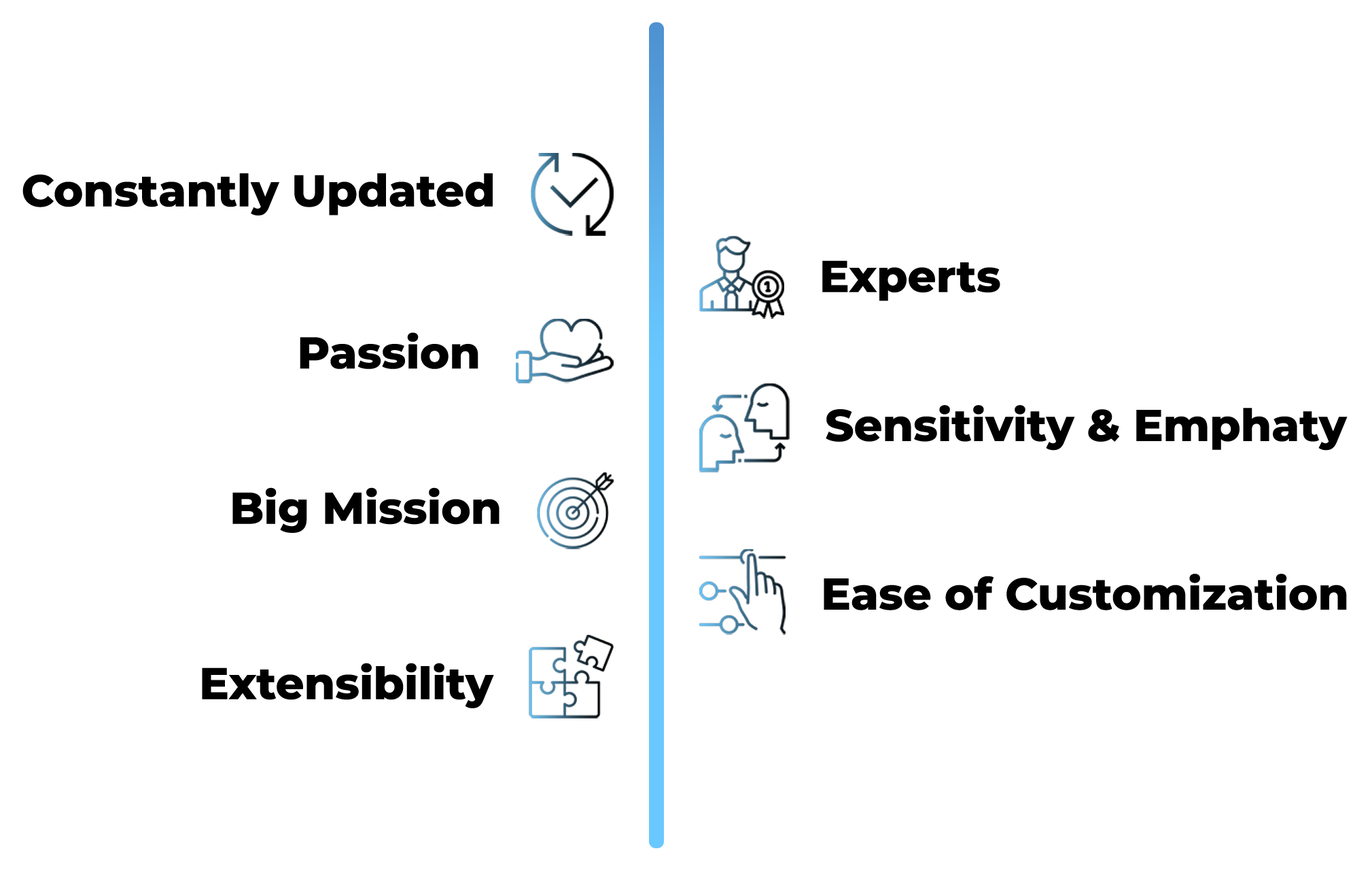
<style>
.page{position:relative;width:1370px;height:870px;background:#ffffff}
.page>*{position:absolute;margin:0}
.t1{font:44.5px "Montserrat-ExtraBold";color:#000000}
</style>
<div class="page">
<p class="t1" style="left:22px;top:173px;width:471px;height:42px">Constantly Updated</p>
<p class="t1" style="left:823px;top:260px;width:178px;height:41px">Experts</p>
<p class="t1" style="left:300px;top:332px;width:179px;height:37px">Passion</p>
<p class="t1" style="left:826px;top:405px;width:522px;height:46px">Sensitivity &amp; Emphaty</p>
<p class="t1" style="left:232px;top:487px;width:268px;height:46px">Big Mission</p>
<p class="t1" style="left:824px;top:574px;width:523px;height:36px">Ease of Customization</p>
<p class="t1" style="left:202px;top:663px;width:292px;height:45px">Extensibility</p>
</div>
